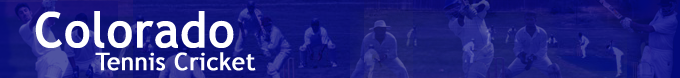
<style>
.page{position:relative;width:680px;height:78px}
.page>*{position:absolute;margin:0}
.t1{font:48px "TrebuchetMS";color:#ffffff;font-weight:bold}
.t2{font:24px "TrebuchetMS";color:#ffffff;font-weight:bold}
</style>
<div class="page">
<p class="t1" style="left:35px;top:11px;width:199px;height:37px">Colorado</p>
<p class="t2" style="left:95px;top:52px;width:161px;height:19px">Tennis Cricket</p>
</div>
